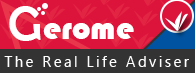
<style>
.page{position:relative;width:195px;height:73px;background:#dc143c}
.page>*{position:absolute;margin:0}
.t1{font:50px "BerlinSansFB-Reg";color:#ffffff}
.t2{font:33.3px "Bauhaus93";color:#ffffff}
.t3{font:15px "Ebrima";letter-spacing:0.16em;color:#ffffff}
</style>
<div class="page">
<p class="t1" style="left:9px;top:6px;width:32px;height:35px">G</p>
<p class="t2" style="left:43px;top:23px;width:91px;height:16px">erome</p>
<p class="t3" style="left:4px;top:56px;width:185px;height:11px">The Real Life Adviser</p>
</div>
